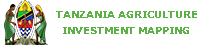
<style>
.page{position:relative;width:210px;height:45px;background:#ffffff}
.page>*{position:absolute;margin:0}
.t1{font:10.4px "Verdana-Bold";color:#5bb146}
</style>
<div class="page">
<p class="t1" style="left:56px;top:11px;width:141px;height:7px">TANZANIA AGRICULTURE</p>
<p class="t1" style="left:63px;top:27px;width:126px;height:7px">INVESTMENT MAPPING</p>
</div>
